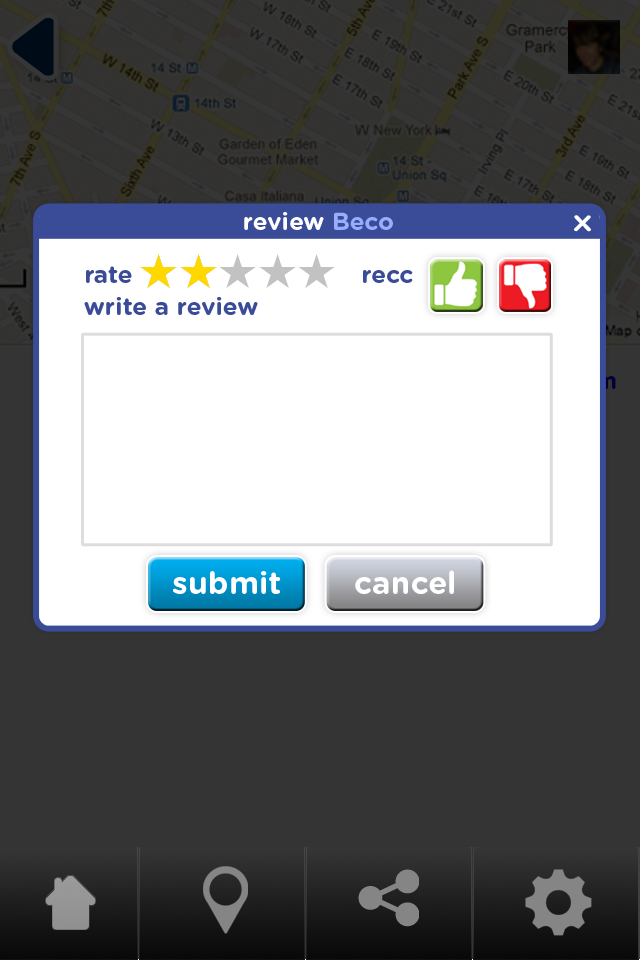
<style>
.page{position:relative;width:640px;height:960px;background:#ffffff}
.page>*{position:absolute;margin:0}
.t1{font:24.5px "GothamRounded-Bold";color:#ffffff}
.t2{font:24.5px "GothamRounded-Bold";color:#97adfe}
.t3{font:22.4px "GothamRounded-Bold";color:#ffffff;scale:1.23 1}
.t4{font:24.5px/16px "GothamRounded-Bold";color:#3a4c98}
.t5{font:31.5px "GothamRounded-Bold";color:#ffffff}
</style>
<div class="page">
<p class="t1" style="left:244px;top:212px;width:149px;height:18px">review <span class="t2">Beco</span></p>
<p class="t3" style="left:574px;top:215px;width:17px;height:17px">X</p>
<p class="t4" style="left:84px;top:266px;width:329px;height:49px">rate                               recc<br><br>write a review</p>
<p class="t5" style="left:173px;top:571px;width:108px;height:23px">submit</p>
<p class="t5" style="left:355px;top:570px;width:99px;height:24px">cancel</p>
</div>
